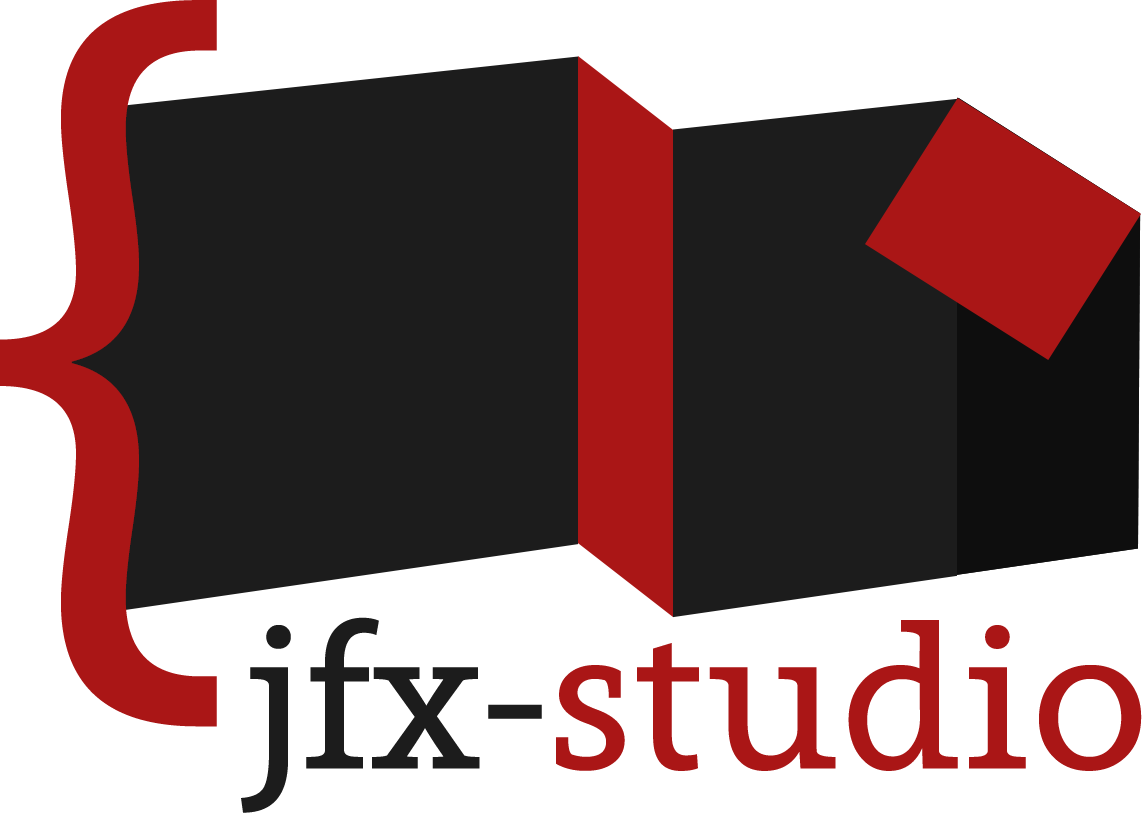
<style>
.page{position:relative;width:1142px;height:813px;background:#1c1c1c}
.page>*{position:absolute;margin:0}
.t1{font:910.1px "GrandesignNeueSerif";color:#aa1616;scale:1.03 1}
.t2{font:209.1px "GrandesignNeueSerif";color:#aa1616;scale:1.03 1}
.t3{font:209.1px "GrandesignNeueSerif";color:#1c1c1c;scale:1.03 1}
</style>
<div class="page">
<p class="t1" style="left:0px;top:0px;width:217px;height:727px">{</p>
<p class="t2" style="left:241px;top:617px;width:901px;height:196px"><span class="t3">jfx-</span>studio</p>
</div>
